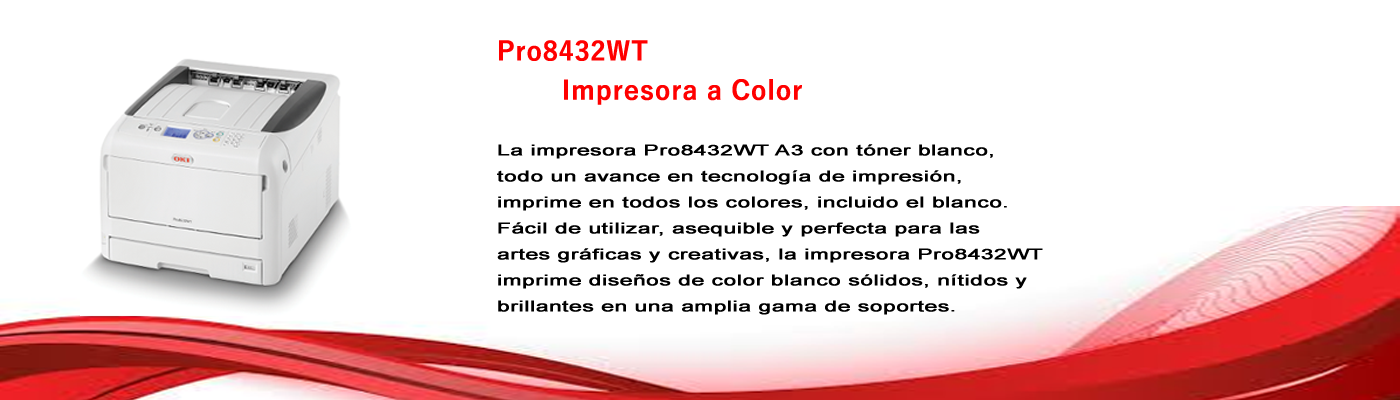
<style>
.page{position:relative;width:1400px;height:400px;background:#ffffff}
.page>*{position:absolute;margin:0}
.t1{font:26px "YuGothic-Bold";letter-spacing:0.01em;color:#ff0000;font-weight:bold}
.t2{font:15px "ArialMT";letter-spacing:0.01em;color:#000000;font-weight:bold;scale:1.48 1}
</style>
<div class="page">
<p class="t1" style="left:499px;top:40px;width:303px;height:65px">Pro8432WT <br>  Impresora a Color</p>
<p class="t2" style="left:497px;top:144px;width:546px;height:171px">La impresora Pro8432WT A3 con tóner blanco, <br>todo un avance en tecnología de impresión, <br>imprime en todos los colores, incluido el blanco.<br>Fácil de utilizar, asequible y perfecta para las <br>artes gráficas y creativas, la impresora Pro8432WT <br>imprime diseños de color blanco sólidos, nítidos y<br>brillantes en una amplia gama de soportes.</p>
</div>
